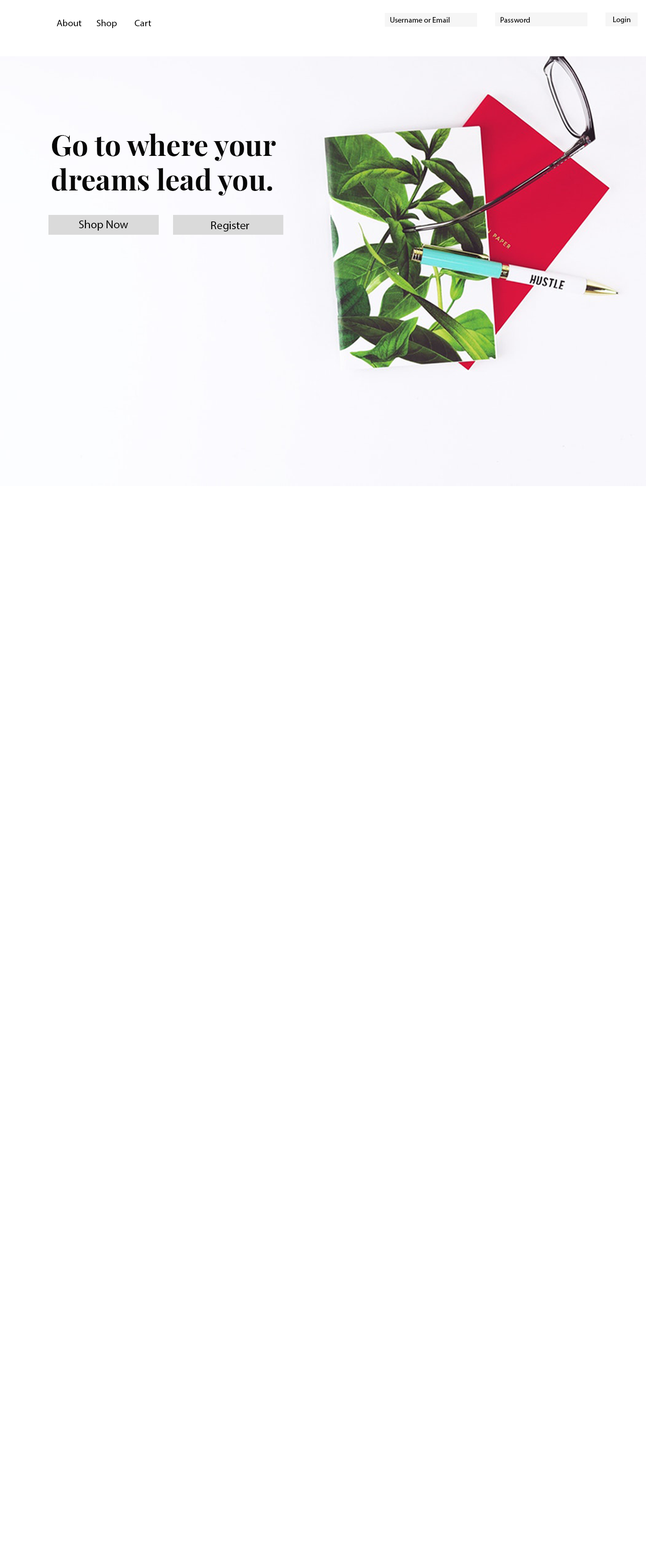
<style>
.page{position:relative;width:646px;height:1568px;background:#ffffff}
.page>*{position:absolute;margin:0}
.t1{font:7.7px "MyriadPro-Regular";color:#000000}
.t2{font:9.6px "MyriadPro-Regular";color:#000000}
.t3{font:28.8px "PlayfairDisplay-Bold";color:#070707}
.t4{font:11.5px "MyriadPro-Regular";color:#000000}
</style>
<div class="page">
<p class="t1" style="left:390px;top:17px;width:59px;height:6px">Username or Email</p>
<p class="t1" style="left:500px;top:17px;width:29px;height:6px">Password</p>
<p class="t1" style="left:613px;top:17px;width:17px;height:7px">Login</p>
<p class="t2" style="left:57px;top:19px;width:25px;height:7px">About</p>
<p class="t2" style="left:96px;top:19px;width:21px;height:9px">Shop</p>
<p class="t2" style="left:135px;top:20px;width:16px;height:6px">Cart</p>
<p class="t3" style="left:52px;top:133px;width:224px;height:63px">Go to where your dreams lead you.</p>
<p class="t4" style="left:79px;top:220px;width:49px;height:11px">Shop Now</p>
<p class="t4" style="left:211px;top:221px;width:38px;height:11px">Register</p>
</div>
